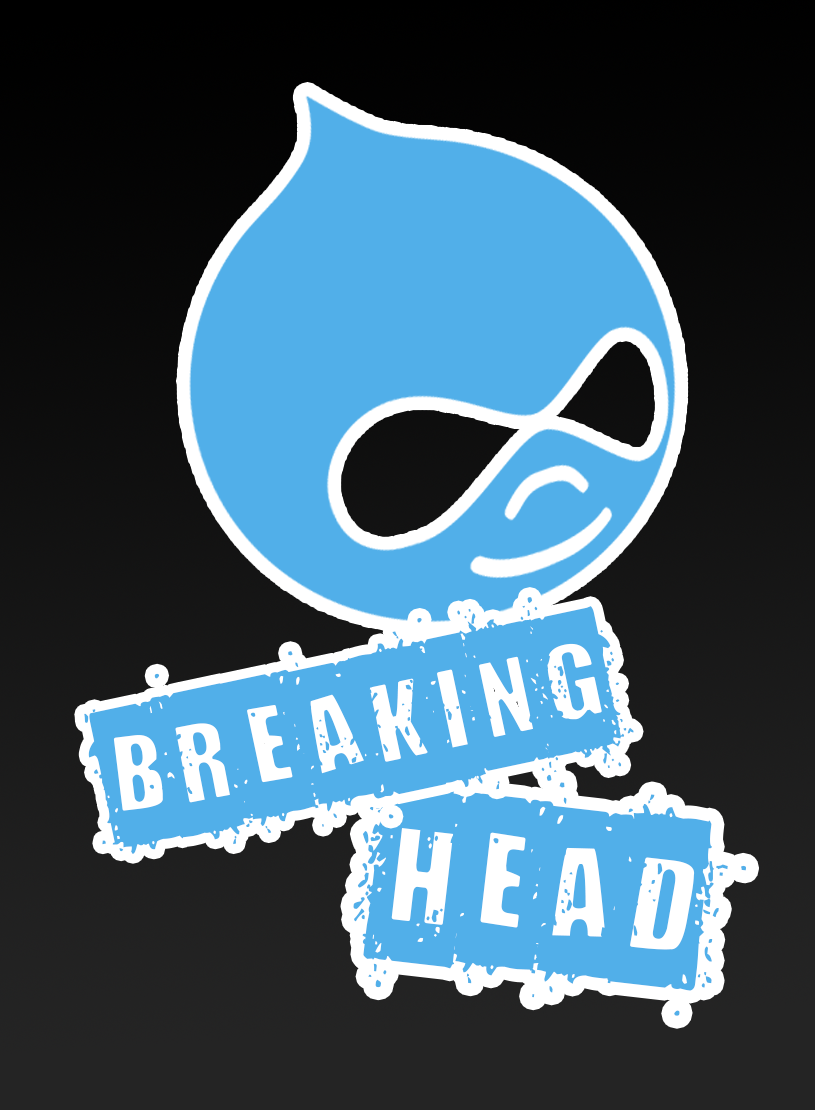
<style>
.page{position:relative;width:815px;height:1110px;background:#51afe9}
.page>*{position:absolute;margin:0}
.t1{font:280px "DistortYouALesson";color:#51afe9;font-variant:small-caps}
.t2{font:340px "DistortYouALesson";color:#51afe9;font-variant:small-caps}
</style>
<div class="page">
<p class="t1" style="left:84px;top:597px;width:550px;height:257px;rotate:-12deg">breaking</p>
<p class="t2" style="left:345px;top:765px;width:401px;height:251px;rotate:7deg">head</p>
</div>
